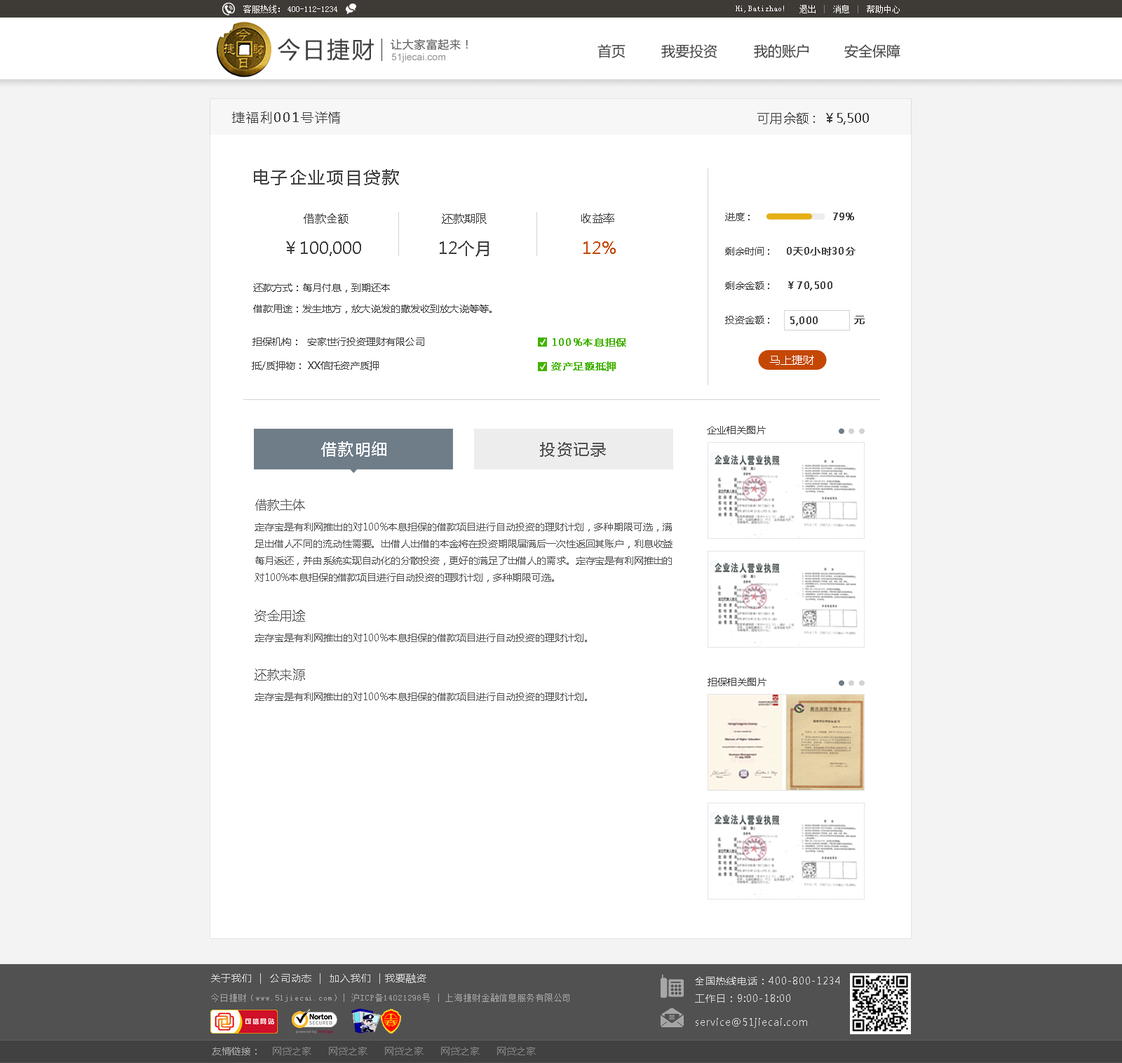
<style>
.page{position:relative;width:1122px;height:1063px;background:#ffffff}
.page>*{position:absolute;margin:0}
.t1{font:8.4px "SimSun";color:#ffffff}
.t2{font:22.4px "MicrosoftYaHei";letter-spacing:0.1em;color:#3f3f3f}
.t3{font:11.2px "MicrosoftYaHei";letter-spacing:0.05em;color:#575757}
.t4{font:9.8px "ArialMT";color:#969697}
.t5{font:14px "MicrosoftYaHei";color:#414141}
.t6{font:12.6px "MicrosoftYaHei";letter-spacing:0.1em;color:#3f3f3f}
.t7{font:12.6px "MicrosoftYaHei";color:#3f3f3f}
.t8{font:16.8px "MicrosoftYaHei";letter-spacing:0.1em;color:#414141}
.t9{font:11.2px "MicrosoftYaHei";color:#414141}
.t10{font:9.8px "MicrosoftYaHei";color:#414141}
.t11{font:9.8px "MicrosoftYaHei";color:#414141;font-weight:bold}
.t12{font:16.8px "MicrosoftYaHei";color:#414141}
.t13{font:16.8px "MicrosoftYaHei";color:#c44704}
.t14{font:9.8px/21px "MicrosoftYaHei";color:#414141}
.t15{font:9.8px "MicrosoftYaHei";letter-spacing:0.04em;color:#42b302;font-weight:bold}
.t16{font:11.2px "MicrosoftYaHei";color:#ffffff}
.t17{font:9.8px "MicrosoftYaHei";letter-spacing:0.07em;color:#dbdbdb}
.t18{font:9.8px "MicrosoftYaHei";letter-spacing:0.07em;color:#dadada}
.t19{font:8.4px "SimSun";letter-spacing:0.07em;color:#a7a7a7}
.t20{font:9.8px "MicrosoftYaHei";color:#858484}
.t21{font:9.8px "MicrosoftYaHei";color:#a7a7a7}
</style>
<div class="page">
<p class="t1" style="left:243px;top:5px;width:37px;height:8px">客服热线：</p>
<p class="t1" style="left:736px;top:6px;width:48px;height:7px">Hi,Batizhao!</p>
<p class="t1" style="left:800px;top:5px;width:100px;height:8px">退出    消息    帮助中心</p>
<p class="t1" style="left:288px;top:6px;width:49px;height:6px">400-112-1234</p>
<p class="t2" style="left:278px;top:39px;width:96px;height:22px">今日捷财</p>
<p class="t3" style="left:391px;top:39px;width:77px;height:11px">让大家富起来！</p>
<p class="t4" style="left:391px;top:53px;width:54px;height:9px">51jiecai.com</p>
<p class="t5" style="left:598px;top:44px;width:28px;height:14px">首页</p>
<p class="t5" style="left:661px;top:44px;width:57px;height:14px">我要投资</p>
<p class="t5" style="left:754px;top:44px;width:55px;height:14px">我的账户</p>
<p class="t5" style="left:844px;top:44px;width:57px;height:14px">安全保障</p>
<p class="t6" style="left:232px;top:112px;width:108px;height:11px">捷福利001号详情</p>
<p class="t7" style="left:757px;top:112px;width:112px;height:13px">可用余额 :  ￥5,500</p>
<p class="t8" style="left:254px;top:169px;width:145px;height:17px">电子企业项目贷款</p>
<p class="t9" style="left:304px;top:213px;width:45px;height:11px">借款金额</p>
<p class="t9" style="left:442px;top:213px;width:45px;height:11px">还款期限</p>
<p class="t9" style="left:581px;top:213px;width:33px;height:11px">收益率</p>
<p class="t10" style="left:725px;top:213px;width:25px;height:8px">进度 :</p>
<p class="t11" style="left:833px;top:213px;width:21px;height:7px">79%</p>
<p class="t12" style="left:286px;top:241px;width:75px;height:15px">￥100,000</p>
<p class="t12" style="left:440px;top:241px;width:49px;height:16px">12个月</p>
<p class="t13" style="left:584px;top:241px;width:32px;height:13px">12%</p>
<p class="t10" style="left:725px;top:247px;width:44px;height:8px">剩余时间 :</p>
<p class="t11" style="left:787px;top:247px;width:69px;height:8px">0天0小时30分</p>
<p class="t10" style="left:725px;top:281px;width:44px;height:9px">剩余金额 :</p>
<p class="t11" style="left:788px;top:281px;width:45px;height:9px">￥70,500</p>
<p class="t14" style="left:253px;top:283px;width:239px;height:31px;text-align:justify">还款方式：每月付息，到期还本<br>借款用途：发生地方，放大说发的撒发收到放大说等等。</p>
<p class="t10" style="left:725px;top:316px;width:44px;height:8px">投资金额 :</p>
<p class="t11" style="left:790px;top:316px;width:28px;height:9px">5,000</p>
<p class="t11" style="left:854px;top:316px;width:11px;height:8px">元</p>
<p class="t10" style="left:252px;top:337px;width:45px;height:9px">担保机构：</p>
<p class="t10" style="left:307px;top:337px;width:117px;height:9px">安家世行投资理财有限公司</p>
<p class="t15" style="left:553px;top:338px;width:73px;height:8px">100%本息担保</p>
<p class="t10" style="left:252px;top:361px;width:49px;height:9px">抵/质押物：</p>
<p class="t10" style="left:308px;top:361px;width:71px;height:9px">XX信托资产质押</p>
<p class="t15" style="left:551px;top:361px;width:65px;height:10px">资产足额抵押</p>
<p class="t16" style="left:770px;top:355px;width:44px;height:10px">马上捷财</p>
<p class="t10" style="left:707px;top:426px;width:59px;height:8px">企业相关图片</p>
<p class="t10" style="left:708px;top:678px;width:59px;height:8px">担保相关图片</p>
<p class="t17" style="left:211px;top:973px;width:215px;height:10px">关于我们  |  公司动态  |  加入我们  | 我要融资</p>
<p class="t18" style="left:695px;top:976px;width:145px;height:26px">全国热线电话：400-800-1234<br>工作日：9:00-18:00</p>
<p class="t19" style="left:211px;top:993px;width:359px;height:9px">今日捷财（www.51jiecai.com）| 沪ICP备14021298号 | 上海捷财金融信息服务有限公司</p>
<p class="t18" style="left:696px;top:1018px;width:111px;height:10px">service@51jiecai.com</p>
<p class="t20" style="left:212px;top:1046px;width:324px;height:9px"><span class="t21">友情链接：</span>    网贷之家      网贷之家      网贷之家      网贷之家      网贷之家</p>
</div>
